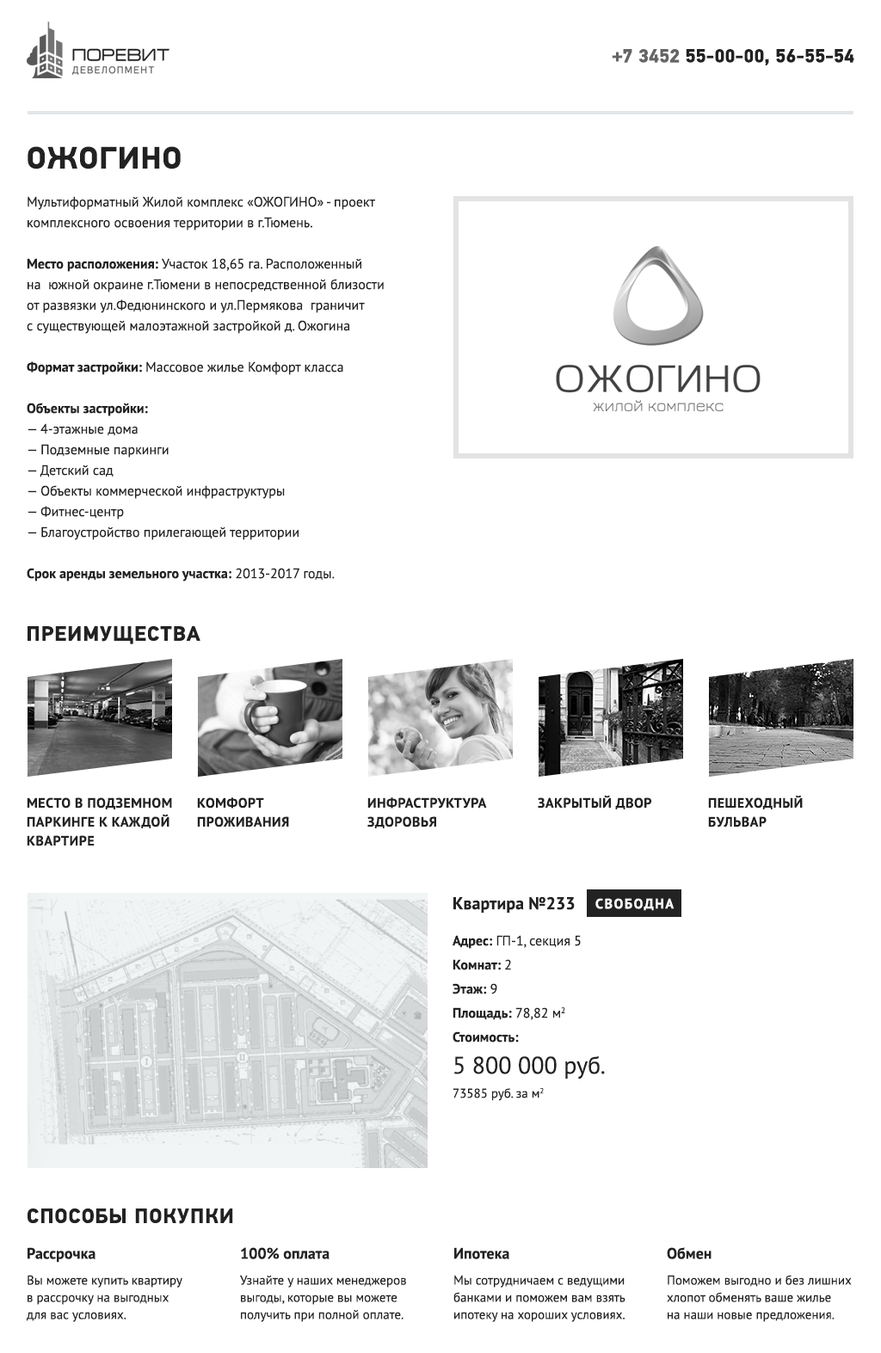
<style>
.page{position:relative;width:881px;height:1353px;background:#ffffff}
.page>*{position:absolute;margin:0}
.t1{font:18.9px "PFDinTextPro-Bold";color:#222222;text-transform:uppercase}
.t2{font:18.9px "PFDinTextPro-Bold";color:#656565;text-transform:uppercase}
.t3{font:31px "PFDinTextPro-Bold";letter-spacing:0.03em;color:#222222;text-transform:uppercase}
.t4{font:13.8px/20.6px "PTSans-Regular";color:#222222}
.t5{font:13.8px/20.6px "PTSans-Bold";color:#222222}
.t6{font:20.6px "PFDinTextPro-Bold";letter-spacing:0.04em;color:#222222;text-transform:uppercase}
.t7{font:13.8px/18.9px "PTSans-Bold";letter-spacing:0.03em;color:#222222;text-transform:uppercase}
.t8{font:13.8px "PTSans-Bold";letter-spacing:0.03em;color:#222222;text-transform:uppercase}
.t9{font:17.2px "PTSans-Bold";color:#222222}
.t10{font:13.8px "PTSans-Bold";letter-spacing:0.1em;color:#ffffff;text-transform:uppercase}
.t11{font:13.8px/24.1px "PTSans-Regular";color:#222222}
.t12{font:13.8px/24.1px "PTSans-Bold";color:#222222}
.t13{font:24.1px/31.8px "PTSans-Regular";color:#222222}
.t14{font:12.9px "PTSans-Regular";color:#222222}
.t15{font:15.5px "PTSans-Bold";color:#222222}
.t16{font:12.9px/17.2px "PTSans-Regular";color:#222222}
</style>
<div class="page">
<p class="t1" style="left:612px;top:49px;width:242px;height:16px"><span class="t2">+7 3452 </span>55-00-00, 56-55-54</p>
<p class="t3" style="left:28px;top:146px;width:153px;height:23px">ожогино</p>
<p class="t4" style="left:27px;top:196px;width:357px;height:386px">Мультиформатный Жилой комплекс «ОЖОГИНО» - проект комплексного освоения территории в г.Тюмень.<br><br><span class="t5">Место расположения: </span>Участок 18,65 га. Расположенный<br>на  южной окраине г.Тюмени в непосредственной близости<br>от развязки ул.Федюнинского и ул.Пермякова  граничит<br>с существующей малоэтажной застройкой д. Ожогина <br><br><span class="t5">Формат застройки: </span>Массовое жилье Комфорт класса<br><br><span class="t5">Объекты застройки: <br></span>— 4-этажные дома<br>— Подземные паркинги<br>— Детский сад<br>— Объекты коммерческой инфраструктуры<br>— Фитнес-центр<br>— Благоустройство прилегающей территории<br><br><span class="t5">Срок аренды земельного участка:</span> 2013-2017 годы.</p>
<p class="t6" style="left:28px;top:626px;width:172px;height:18px">преимущества</p>
<p class="t7" style="left:27px;top:798px;width:145px;height:49px">Место в подземном<br>паркинге к каждой<br>квартире</p>
<p class="t7" style="left:197px;top:798px;width:92px;height:30px">Комфорт<br>проживания</p>
<p class="t7" style="left:367px;top:798px;width:120px;height:31px">Инфраструктура<br>здоровья</p>
<p class="t8" style="left:538px;top:796px;width:114px;height:14px">Закрытый двор</p>
<p class="t7" style="left:708px;top:796px;width:95px;height:32px">Пешеходный<br>бульвар</p>
<p class="t9" style="left:453px;top:897px;width:122px;height:17px">Квартира №233</p>
<p class="t10" style="left:595px;top:898px;width:80px;height:13px">Свободна</p>
<p class="t11" style="left:453px;top:935px;width:152px;height:144px"><span class="t12">Адрес:</span> ГП-1, секция 5<br><span class="t12">Комнат: </span>2<br><span class="t12">Этаж:</span> 9<br><span class="t12">Площадь:</span> 78,82 м2<br><span class="t12">Стоимость:<br></span><span class="t13">5 800 000 руб.</span></p>
<p class="t14" style="left:453px;top:1088px;width:91px;height:13px">73585 руб. за м2</p>
<p class="t6" style="left:28px;top:1209px;width:205px;height:15px">способы покупки</p>
<p class="t15" style="left:28px;top:1248px;width:68px;height:15px">Рассрочка</p>
<p class="t15" style="left:241px;top:1248px;width:89px;height:12px">100% оплата</p>
<p class="t15" style="left:454px;top:1248px;width:55px;height:12px">Ипотека</p>
<p class="t15" style="left:667px;top:1248px;width:45px;height:12px">Обмен</p>
<p class="t16" style="left:27px;top:1275px;width:155px;height:47px">Вы можете купить квартиру<br>в рассрочку на выгодных<br>для вас условиях.</p>
<p class="t16" style="left:240px;top:1275px;width:166px;height:47px">Узнайте у наших менеджеров выгоды, которые вы можете получить при полной оплате.</p>
<p class="t16" style="left:453px;top:1275px;width:173px;height:47px">Мы сотрудничаем с ведущими банками и поможем вам взять ипотеку на хороших условиях.</p>
<p class="t16" style="left:667px;top:1275px;width:185px;height:47px">Поможем выгодно и без лишних хлопот обменять ваше жилье<br>на наши новые предложения.</p>
</div>
